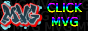
<style>
.page{position:relative;width:88px;height:31px;background:#000000}
.page>*{position:absolute;margin:0}
.t1{font:12px "AcuminConcept-Regular"}
</style>
<div class="page">
<p class="t1" style="left:47px;top:3px;width:36px;height:10px">CLICK</p>
<p class="t1" style="left:47px;top:3px;width:36px;height:10px">CLICK</p>
<p class="t1" style="left:47px;top:3px;width:36px;height:10px">CLICK</p>
<p class="t1" style="left:47px;top:3px;width:36px;height:10px">CLICK</p>
<p class="t1" style="left:52px;top:17px;width:26px;height:10px">MVG</p>
<p class="t1" style="left:52px;top:17px;width:26px;height:10px">MVG</p>
<p class="t1" style="left:52px;top:17px;width:26px;height:10px">MVG</p>
<p class="t1" style="left:52px;top:17px;width:26px;height:10px">MVG</p>
</div>
